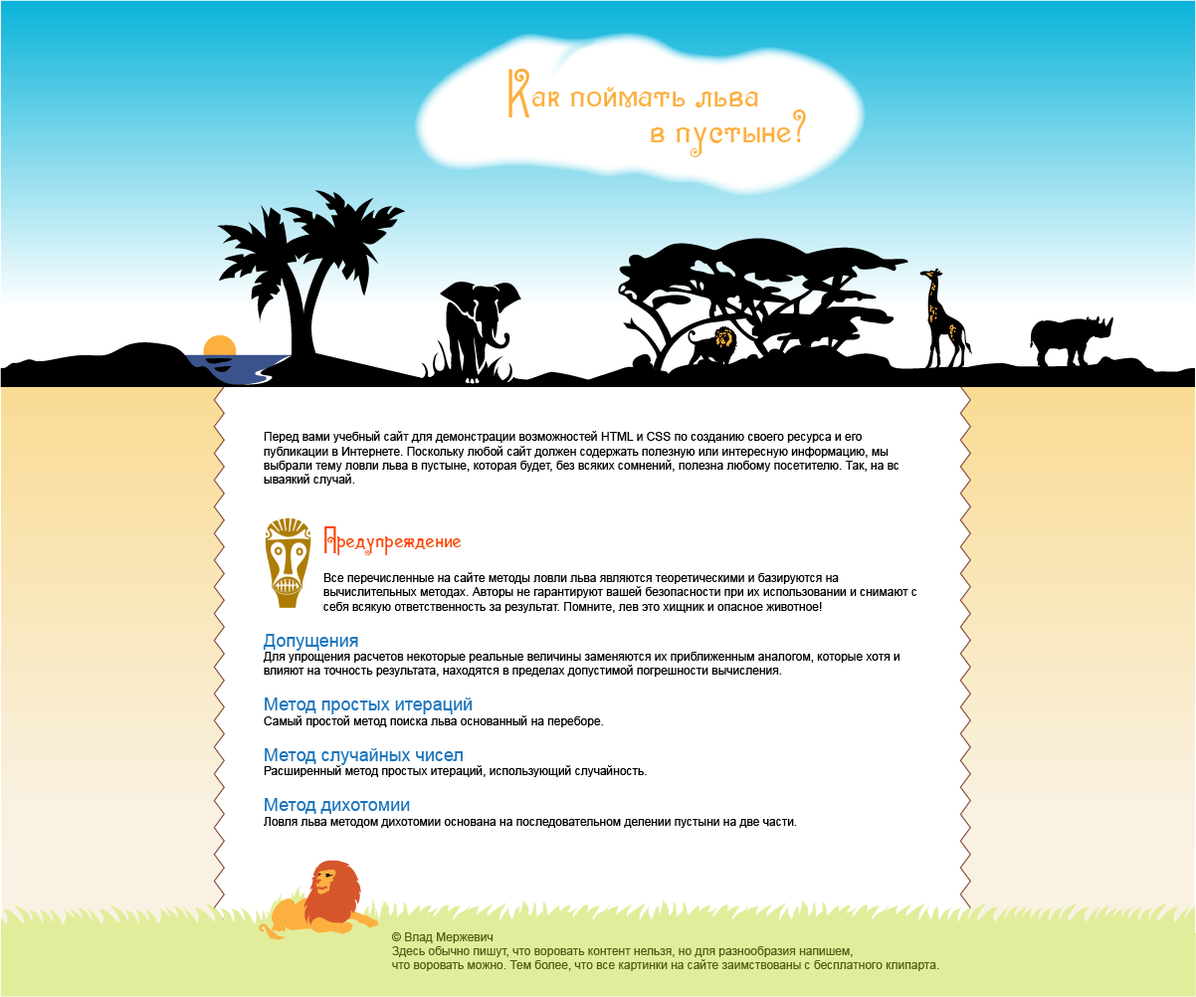
<style>
.page{position:relative;width:1196px;height:997px;background:#ffffff}
.page>*{position:absolute;margin:0}
.t1{font:59.8px "SevillaDecor";color:#fbb040}
.t2{font:11.9px "ArialMT";color:#000000}
.t3{font:33.8px "SevillaDecor";color:#fc4404}
.t4{font:17.9px "ArialMT";color:#1b75bc}
.t5{font:11.9px "ArialMT";color:#526118}
</style>
<div class="page">
<p class="t1" style="left:508px;top:69px;width:251px;height:48px">Как поймать льва</p>
<p class="t1" style="left:651px;top:109px;width:155px;height:48px">в пустыне?</p>
<p class="t2" style="left:263px;top:431px;width:653px;height:397px">Перед вами учебный сайт для демонстрации возможностей HTML и CSS по созданию своего ресурса и его публикации в Интернете. Поскольку любой сайт должен содержать полезную или интересную информацию, мы выбрали тему ловли льва в пустыне, которая будет, без всяких сомнений, полезна любому посетителю. Так, на вс<br>ываякий случай.<br><br><br><span class="t3">Предупреждение<br></span><br>Все перечисленные на сайте методы ловли льва являются теоретическими и базируются на вычислительных методах. Авторы не гарантируют вашей безопасности при их использовании и снимают с себя всякую ответственность за результат. Помните, лев это хищник и опасное животное!<br><br><span class="t4">Допущения<br></span>Для упрощения расчетов некоторые реальные величины заменяются их приближенным аналогом, которые хотя и влияют на точность результата, находятся в пределах допустимой погрешности вычисления. <br><br><span class="t4">Метод простых итераций<br></span>Самый простой метод поиска льва основанный на переборе.<br><br><span class="t4">Метод случайных чисел<br></span>Расширенный метод простых итераций, использующий случайность.<br><br><span class="t4">Метод дихотомии<br></span>Ловля льва методом дихотомии основана на последовательном делении пустыни на две части.</p>
<p class="t5" style="left:391px;top:932px;width:548px;height:39px">© Влад Мержевич<br>Здесь обычно пишут, что воровать контент нельзя, но для разнообразия напишем, <br>что воровать можно. Тем более, что все картинки на сайте заимствованы с бесплатного клипарта.</p>
</div>
